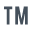
<style>
.page{position:relative;width:32px;height:32px;background:#ffffff}
.page>*{position:absolute;margin:0}
.t1{font:20px "Bebas";letter-spacing:0.05em;color:#45505b}
</style>
<div class="page">
<p class="t1" style="left:4px;top:6px;width:24px;height:19px">TM</p>
</div>
